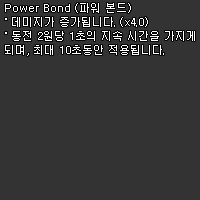
<style>
.page{position:relative;width:200px;height:200px;background:#333333}
.page>*{position:absolute;margin:0}
.t1{font:11px/14px "Dotum";color:#ffffff}
</style>
<div class="page">
<p class="t1" style="left:5px;top:3px;width:190px;height:53px">Power Bond (파워 본드)<br>˚ 데미지가 증가됩니다. (x4.0)<br>˚ 동전 2원당 1초의 지속 시간을 가지게<br>되며, 최대 10초동안 적용됩니다.</p>
</div>
